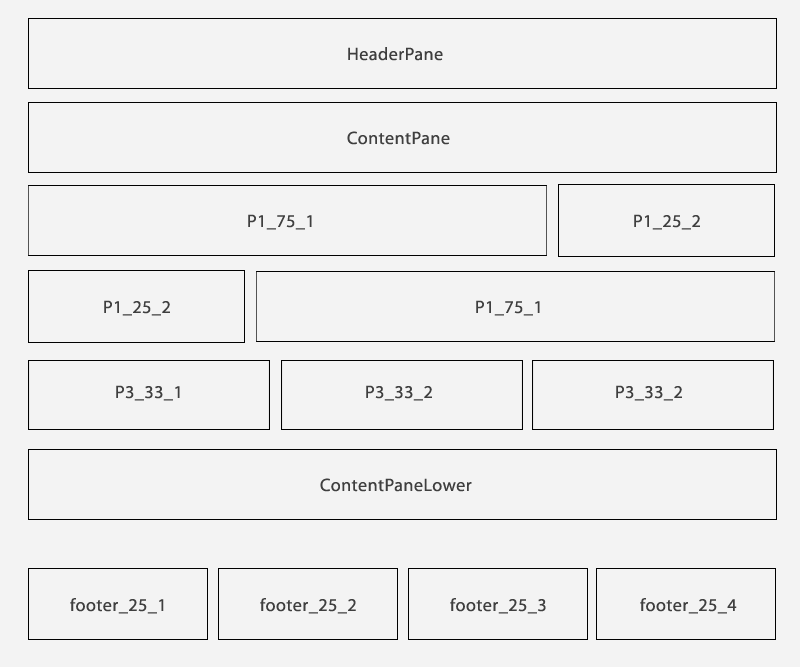
<style>
.page{position:relative;width:800px;height:667px;background:#f3f3f3}
.page>*{position:absolute;margin:0}
.t1{font:18px "MyriadPro-Regular";letter-spacing:0.03em;color:#3f3f3f}
</style>
<div class="page">
<p class="t1" style="left:348px;top:47px;width:95px;height:14px">HeaderPane</p>
<p class="t1" style="left:347px;top:131px;width:103px;height:14px">ContentPane</p>
<p class="t1" style="left:248px;top:214px;width:64px;height:16px">P1_75_1</p>
<p class="t1" style="left:634px;top:214px;width:66px;height:16px">P1_25_2</p>
<p class="t1" style="left:104px;top:300px;width:66px;height:16px">P1_25_2</p>
<p class="t1" style="left:476px;top:300px;width:64px;height:16px">P1_75_1</p>
<p class="t1" style="left:116px;top:385px;width:64px;height:16px">P3_33_1</p>
<p class="t1" style="left:366px;top:385px;width:66px;height:16px">P3_33_2</p>
<p class="t1" style="left:616px;top:385px;width:66px;height:16px">P3_33_2</p>
<p class="t1" style="left:320px;top:478px;width:152px;height:14px">ContentPaneLower</p>
<p class="t1" style="left:70px;top:598px;width:94px;height:16px">footer_25_1</p>
<p class="t1" style="left:260px;top:598px;width:96px;height:16px">footer_25_2</p>
<p class="t1" style="left:450px;top:598px;width:96px;height:16px">footer_25_3</p>
<p class="t1" style="left:640px;top:598px;width:97px;height:16px">footer_25_4</p>
</div>
